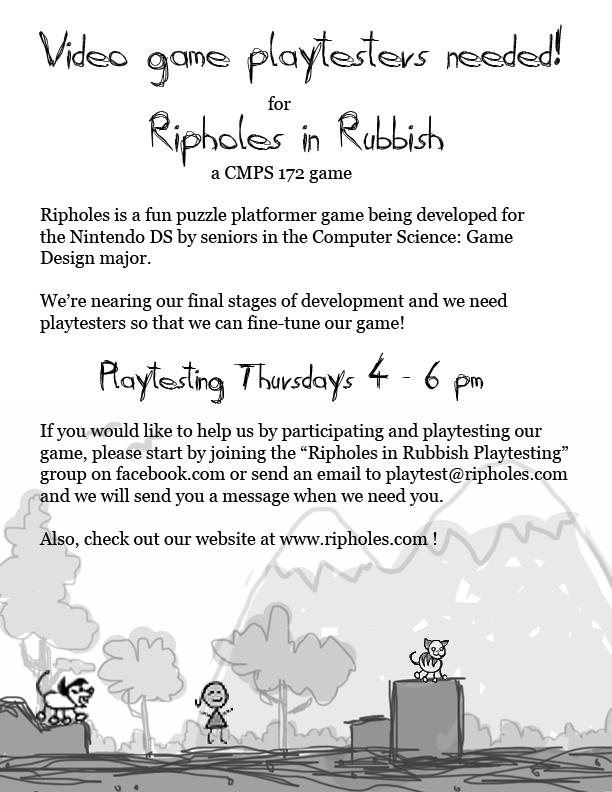
<style>
.page{position:relative;width:612px;height:792px;background:#ffffff}
.page>*{position:absolute;margin:0}
.t1{font:48px "Daubed";color:#000000}
.t2{font:18px "Georgia";color:#000000}
.t3{font:36px "Daubed";color:#000000}
</style>
<div class="page">
<p class="t1" style="left:39px;top:24px;width:523px;height:63px">Video game playtesters needed!</p>
<p class="t2" style="left:268px;top:96px;width:23px;height:14px">for</p>
<p class="t1" style="left:148px;top:111px;width:296px;height:56px">Ripholes in Rubbish</p>
<p class="t2" style="left:211px;top:166px;width:141px;height:17px">a CMPS 172 game</p>
<p class="t2" style="left:39px;top:207px;width:529px;height:342px">Ripholes is a fun puzzle platformer game being developed for <br>the Nintendo DS by seniors in the Computer Science: Game <br>Design major.<br><br>We’re nearing our final stages of development and we need <br>playtesters so that we can fine-tune our game!<br><br><br><br><br>If you would like to help us by participating and playtesting our <br>game, please start by joining the “Ripholes in Rubbish Playtesting” <br>group on facebook.com or send an email to playtest@ripholes.com <br>and we will send you a message when we need you.<br><br>Also, check out our website at www.ripholes.com !</p>
<p class="t3" style="left:100px;top:352px;width:384px;height:52px">Playtesting Thursdays 4 - 6 pm</p>
</div>
